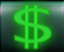
<style>
.page{position:relative;width:64px;height:52px}
.page>*{position:absolute;margin:0}
.t1{font:42px "PetitaMedium";letter-spacing:-0.04em;color:#27ed31;scale:1.17 1}
.t2{font:48.5px "PetitaMedium";letter-spacing:-0.04em;color:#2ed536;scale:1.88 1}
</style>
<div class="page">
<p class="t1" style="left:25px;top:5px;width:13px;height:44px">||</p>
<p class="t2" style="left:14px;top:7px;width:37px;height:36px">S</p>
</div>
